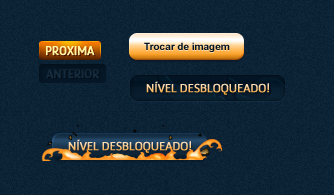
<style>
.page{position:relative;width:334px;height:195px;background:#0f2538}
.page>*{position:absolute;margin:0}
.t1{font:12px "Anivers-Regular";letter-spacing:-0.025em;color:#fff5a2;text-transform:uppercase;font-weight:bold}
.t2{font:10px "Arial-BoldMT";color:#051a2c}
.t3{font:12px "Anivers-Regular";letter-spacing:-0.025em;color:#142a3c;text-transform:uppercase;font-weight:bold}
.t4{font:12px "Anivers-Regular";letter-spacing:-0.025em;text-transform:uppercase;font-weight:bold}
</style>
<div class="page">
<p class="t1" style="left:46px;top:46px;width:49px;height:10px">PROXIMA</p>
<p class="t2" style="left:144px;top:42px;width:86px;height:10px">Trocar de imagem</p>
<p class="t3" style="left:46px;top:69px;width:54px;height:10px">ANTERIOR</p>
<p class="t4" style="left:146px;top:81px;width:123px;height:14px">NÍVEL DESBLOQUEADO!</p>
<p class="t4" style="left:68px;top:139px;width:123px;height:14px">NÍVEL DESBLOQUEADO!</p>
</div>
